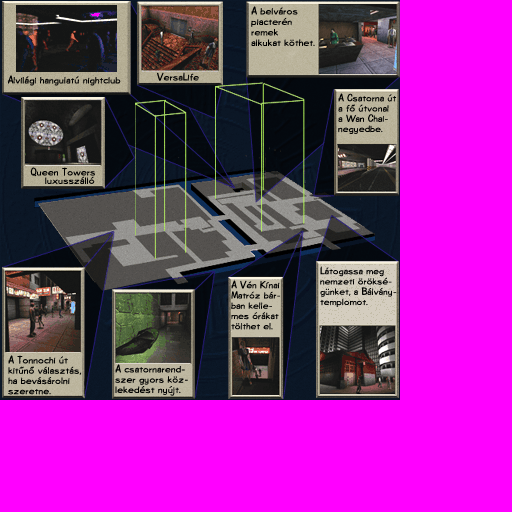
<style>
.page{position:relative;width:512px;height:512px;background:#ff00ff}
.page>*{position:absolute;margin:0}
.t1{font:10.5px/10.5px "Diego-Regular";letter-spacing:0.03em;color:#000000}
.t2{font:10.5px "Diego-Regular";letter-spacing:0.03em;color:#000000}
.t3{font:10.2px/10.2px "Diego-Regular";letter-spacing:0.03em;color:#000000}
.t4{font:10.5px/8.4px "Diego-Regular";letter-spacing:0.03em;color:#000000}
.t5{font:10.1px/10.3px "Diego-Regular";letter-spacing:0.03em;color:#000000}
.t6{font:10.5px/10.3px "Diego-Regular";letter-spacing:0.03em;color:#000000}
</style>
<div class="page">
<p class="t1" style="left:251px;top:6px;width:64px;height:40px">A belváros<br>piacterén<br>remek<br>alkukat köthet.</p>
<p class="t2" style="left:7px;top:75px;width:114px;height:11px">Alvilági hangulatú nightclub</p>
<p class="t2" style="left:157px;top:72px;width:42px;height:9px">VersaLife</p>
<p class="t3" style="left:338px;top:93px;width:59px;height:41px">A Csatorna út<br>a fő útvonal<br>a Wan Chai-<br>negyedbe.</p>
<p class="t4" style="left:30px;top:167px;width:65px;height:18px;text-align:center">Queen Towers<br>    luxusszálló</p>
<p class="t5" style="left:320px;top:266px;width:77px;height:41px">Látogassa meg<br>nemzeti öröksé-<br>günket, a Bálvány-<br>templomot.</p>
<p class="t5" style="left:231px;top:280px;width:49px;height:50px">A Vén Kínai<br>Matróz bár-<br>ban kelle-<br>mes órákat<br>tölthet el.</p>
<p class="t6" style="left:8px;top:355px;width:74px;height:40px">A Tonnochi út<br>kitűnő választás,<br>ha bevásárolni<br>szeretne.</p>
<p class="t6" style="left:115px;top:364px;width:73px;height:32px">A csatornarend-<br>szer gyors köz-<br>lekedést nyújt.</p>
</div>
